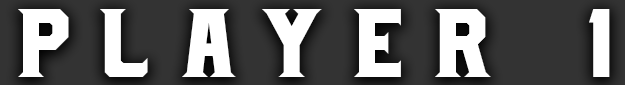
<style>
.page{position:relative;width:625px;height:85px;background:#333333}
.page>*{position:absolute;margin:0}
.t1{font:97px "COMPANYRegular";letter-spacing:0.3em;color:#ffffff}
</style>
<div class="page">
<p class="t1" style="left:18px;top:9px;width:592px;height:68px">PLAYER 1</p>
</div>
